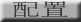
<style>
.page{position:relative;width:81px;height:22px}
.page>*{position:absolute;margin:0}
.t1{font:18px "SimSun";color:#3a3a3a;scale:1.59 1}
</style>
<div class="page">
<p class="t1" style="left:0px;top:0px;width:81px;height:18px">配置</p>
</div>
